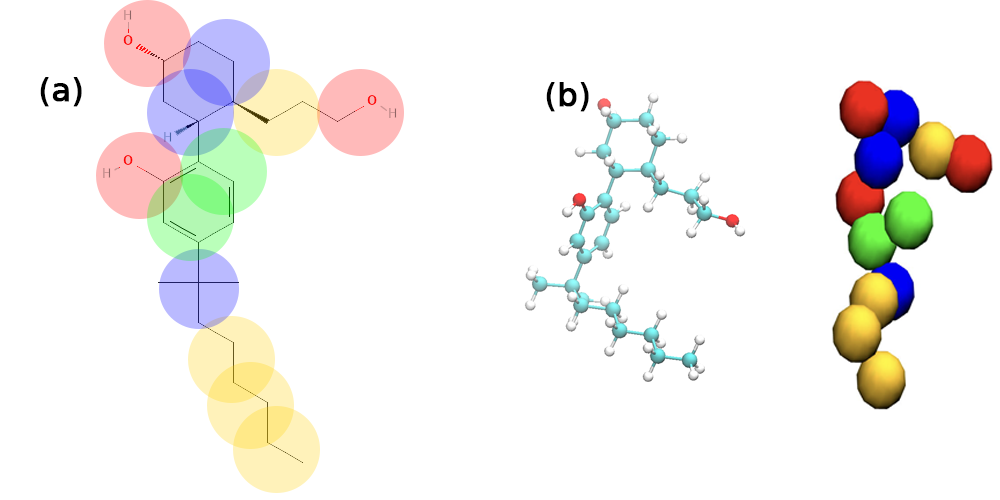
<style>
.page{position:relative;width:1000px;height:500px;background:#ffffff}
.page>*{position:absolute;margin:0}
.t1{font:32px "DejaVuSans";color:#000000;font-weight:bold}
</style>
<div class="page">
<p class="t1" style="left:40px;top:77px;width:42px;height:30px">(a)</p>
<p class="t1" style="left:546px;top:82px;width:43px;height:30px">(b)</p>
</div>
